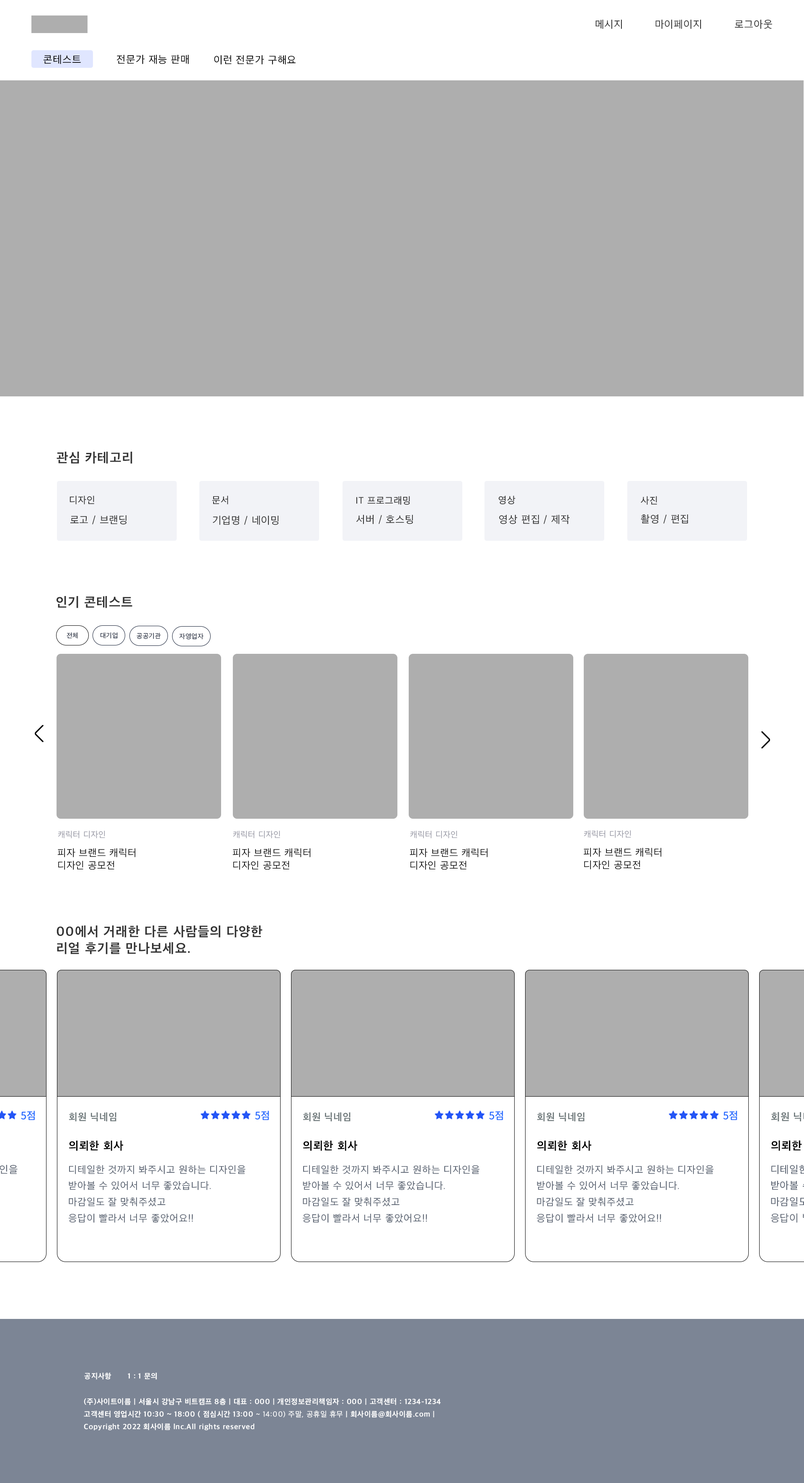
<style>
.page{position:relative;width:804px;height:1483px;background:#ffffff}
.page>*{position:absolute;margin:0}
.t1{font:10.5px "AppleSDGothicNeo-Regular";letter-spacing:0.05em;color:#333333}
.t2{font:10.5px "AppleSDGothicNeo-Regular";letter-spacing:0.05em;color:#000000}
.t3{font:13.4px "AppleSDGothicNeo-Bold";letter-spacing:0.05em;color:#333333}
.t4{font:9.6px "AppleSDGothicNeo-Regular";letter-spacing:0.05em;color:#333333}
.t5{font:6.7px "AppleSDGothicNeo-Light";letter-spacing:0.05em;color:#111c32}
.t6{font:8.4px "AppleSDGothicNeo-Light";letter-spacing:0.05em;color:#9394a1}
.t7{font:10px/12.6px "AppleSDGothicNeo-Light";letter-spacing:0.05em;color:#000000}
.t8{font:13.4px/16.7px "AppleSDGothicNeo-Bold";letter-spacing:0.05em;color:#333333}
.t9{font:10px "AppleSDGothicNeo-Bold";letter-spacing:0.05em;color:#6e787a}
.t10{font:11.3px "AppleSDGothicNeo-Bold";letter-spacing:0.05em;color:#000000}
.t11{font:10px/16.2px "AppleSDGothicNeo-Regular";letter-spacing:0.05em;color:#586170}
.t12{font:7.5px "AppleSDGothicNeo-ExtraBold";letter-spacing:0.05em;color:#ffffff}
.t13{font:7.5px/12.6px "AppleSDGothicNeo-Bold";letter-spacing:0.05em;color:#ffffff}
.t14{font:7.5px/12.6px "AppleSDGothicNeo-Regular";letter-spacing:0.05em;color:#ffffff}
</style>
<div class="page">
<p class="t1" style="left:595px;top:20px;width:27px;height:9px">메시지</p>
<p class="t1" style="left:655px;top:20px;width:46px;height:9px">마이페이지</p>
<p class="t1" style="left:735px;top:20px;width:37px;height:9px">로그아웃</p>
<p class="t2" style="left:44px;top:55px;width:37px;height:9px">콘테스트</p>
<p class="t2" style="left:117px;top:55px;width:72px;height:9px">전문가 재능 판매</p>
<p class="t2" style="left:214px;top:55px;width:82px;height:9px">이런 전문가 구해요</p>
<p class="t3" style="left:57px;top:452px;width:75px;height:12px">관심 카테고리</p>
<p class="t4" style="left:70px;top:496px;width:24px;height:9px">디자인</p>
<p class="t4" style="left:212px;top:496px;width:16px;height:9px">문서</p>
<p class="t4" style="left:356px;top:496px;width:54px;height:9px">IT 프로그래밍</p>
<p class="t4" style="left:498px;top:496px;width:17px;height:9px">영상</p>
<p class="t4" style="left:641px;top:496px;width:16px;height:9px">사진</p>
<p class="t1" style="left:70px;top:515px;width:56px;height:10px">로고 / 브랜딩</p>
<p class="t1" style="left:213px;top:516px;width:65px;height:9px">기업명 / 네이밍</p>
<p class="t1" style="left:356px;top:515px;width:57px;height:9px">서버 / 호스팅</p>
<p class="t1" style="left:499px;top:515px;width:70px;height:9px">영상 편집 / 제작</p>
<p class="t1" style="left:641px;top:515px;width:47px;height:9px">촬영 / 편집</p>
<p class="t3" style="left:56px;top:596px;width:76px;height:12px">인기 콘테스트</p>
<p class="t5" style="left:67px;top:633px;width:11px;height:6px">전체</p>
<p class="t5" style="left:100px;top:633px;width:18px;height:6px">대기업</p>
<p class="t5" style="left:136px;top:633px;width:25px;height:6px">공공기관</p>
<p class="t5" style="left:179px;top:633px;width:24px;height:7px">자영업자</p>
<p class="t6" style="left:58px;top:831px;width:47px;height:8px">캐릭터 디자인</p>
<p class="t6" style="left:233px;top:831px;width:47px;height:8px">캐릭터 디자인</p>
<p class="t6" style="left:410px;top:831px;width:47px;height:8px">캐릭터 디자인</p>
<p class="t6" style="left:584px;top:830px;width:47px;height:8px">캐릭터 디자인</p>
<p class="t7" style="left:57px;top:848px;width:79px;height:22px">피자 브랜드 캐릭터 <br>디자인 공모전</p>
<p class="t7" style="left:232px;top:848px;width:79px;height:22px">피자 브랜드 캐릭터 <br>디자인 공모전</p>
<p class="t7" style="left:409px;top:848px;width:79px;height:22px">피자 브랜드 캐릭터 <br>디자인 공모전</p>
<p class="t7" style="left:583px;top:848px;width:79px;height:22px">피자 브랜드 캐릭터 <br>디자인 공모전</p>
<p class="t8" style="left:57px;top:926px;width:206px;height:29px">00에서 거래한 다른 사람들의 다양한<br>리얼 후기를 만나보세요.</p>
<p class="t9" style="left:69px;top:1112px;width:47px;height:10px">회원 닉네임</p>
<p class="t9" style="left:303px;top:1112px;width:47px;height:10px">회원 닉네임</p>
<p class="t9" style="left:537px;top:1112px;width:47px;height:10px">회원 닉네임</p>
<p class="t10" style="left:69px;top:1141px;width:54px;height:10px">의뢰한 회사</p>
<p class="t10" style="left:303px;top:1141px;width:54px;height:10px">의뢰한 회사</p>
<p class="t10" style="left:537px;top:1141px;width:54px;height:10px">의뢰한 회사</p>
<p class="t11" style="left:69px;top:1165px;width:176px;height:58px">디테일한 것까지 봐주시고 원하는 디자인을 <br>받아볼 수 있어서 너무 좋았습니다. <br>마감일도 잘 맞춰주셨고 <br>응답이 빨라서 너무 좋았어요!!</p>
<p class="t11" style="left:303px;top:1165px;width:176px;height:58px">디테일한 것까지 봐주시고 원하는 디자인을 <br>받아볼 수 있어서 너무 좋았습니다. <br>마감일도 잘 맞춰주셨고 <br>응답이 빨라서 너무 좋았어요!!</p>
<p class="t11" style="left:537px;top:1165px;width:176px;height:58px">디테일한 것까지 봐주시고 원하는 디자인을 <br>받아볼 수 있어서 너무 좋았습니다. <br>마감일도 잘 맞춰주셨고 <br>응답이 빨라서 너무 좋았어요!!</p>
<p class="t12" style="left:84px;top:1373px;width:27px;height:7px">공지사항</p>
<p class="t12" style="left:128px;top:1373px;width:29px;height:7px">1 : 1 문의</p>
<p class="t13" style="left:84px;top:1398px;width:357px;height:33px">(주)사이트이름 | 서울시 강남구 비트캠프 8층 | 대표 : 000 | 개인정보관리책임자 : 000 | 고객센터 : 1234-1234<br>고객센터 영업시간 10:30 ~ 18:00 ( 점심시간 13:00<span class="t14"> ~ 14:00) 주말, 공휴일 휴무</span> | 회사이름@회사이름.com | <br>Copyright 2022 회사이름 lnc.All rights reserved</p>
</div>
